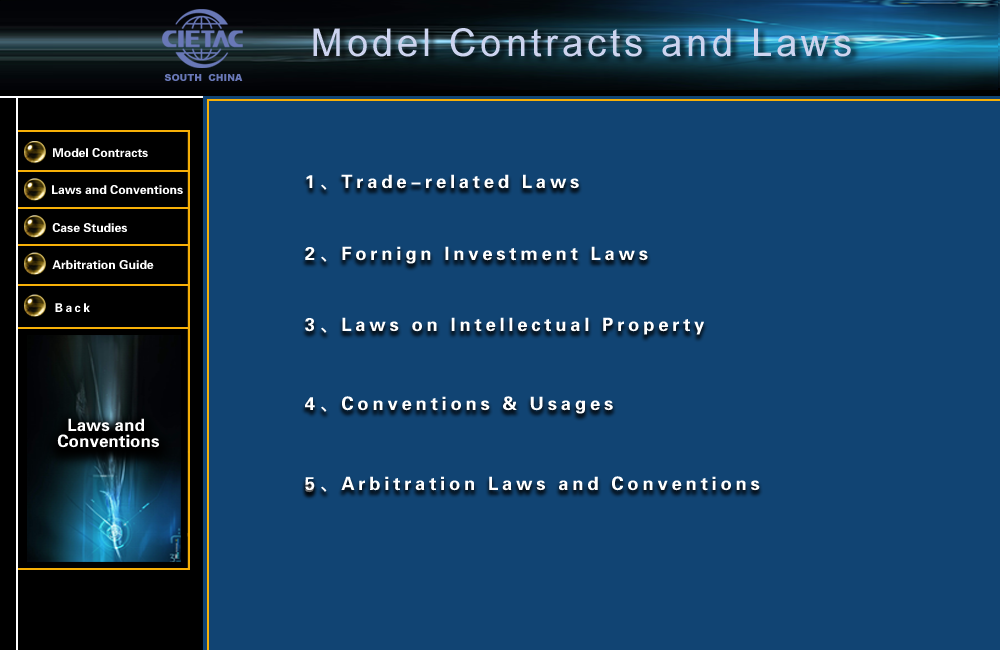
<style>
.page{position:relative;width:1000px;height:650px;background:#114473}
.page>*{position:absolute;margin:0}
.t1{font:12.2px "FZDHTJW--GB1-0";color:#ffffff}
.t2{font:18.6px/17.9px "FZDHTJW--GB1-0";letter-spacing:0.2em;color:#ffffff}
.t3{font:18.6px "FZDHTJW--GB1-0";letter-spacing:0.2em;color:#ffffff}
.t4{font:17.1px/16.4px "FZDHTJW--GB1-0";color:#ffffff}
</style>
<div class="page">
<p class="t1" style="left:53px;top:148px;width:95px;height:9px">Model Contracts</p>
<p class="t2" style="left:305px;top:174px;width:399px;height:319px">1、Trade-related Laws<br><br><br><br>2、Fornign Investment Laws<br><br><br><br>3、Laws on Intellectual Property<br><br><br><br><br><br><br><br><br>s</p>
<p class="t1" style="left:52px;top:185px;width:131px;height:9px">Laws and Conventions</p>
<p class="t1" style="left:52px;top:223px;width:75px;height:9px">Case Studies</p>
<p class="t1" style="left:52px;top:260px;width:102px;height:9px">Arbitration Guide</p>
<p class="t3" style="left:305px;top:396px;width:308px;height:18px">4、Conventions &amp; Usages</p>
<p class="t4" style="left:57px;top:418px;width:102px;height:30px;text-align:center">Laws and<br> Conventions</p>
<p class="t3" style="left:305px;top:476px;width:455px;height:16px">5、Arbitration Laws and Conventions</p>
</div>
